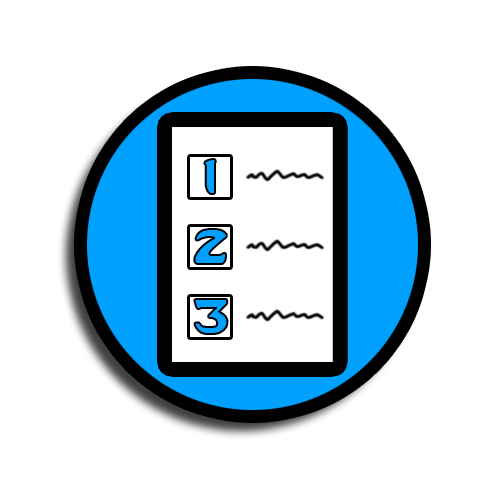
<style>
.page{position:relative;width:500px;height:500px;background:#ffffff}
.page>*{position:absolute;margin:0}
.t1{font:36px "LastNinja";color:#00a0ff}
</style>
<div class="page">
<p class="t1" style="left:205px;top:160px;width:10px;height:33px">1</p>
<p class="t1" style="left:195px;top:230px;width:31px;height:33px">2</p>
<p class="t1" style="left:195px;top:300px;width:32px;height:33px">3</p>
</div>
